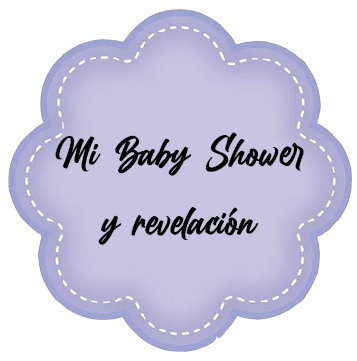
<style>
.page{position:relative;width:357px;height:361px;background:#ffffff}
.page>*{position:absolute;margin:0}
.t1{font:42.7px/69.3px "BillionDreams";color:#000000}
</style>
<div class="page">
<p class="t1" style="left:55px;top:132px;width:249px;height:113px;text-align:center">Mi Baby Shower<br>y revelación</p>
</div>
